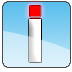
<style>
.page{position:relative;width:72px;height:72px}
.page>*{position:absolute;margin:0}
.t1{font:72px "PoplarStd"}
</style>
<div class="page">
<p class="t1" style="left:29px;top:6px;width:12px;height:56px">i</p>
</div>
